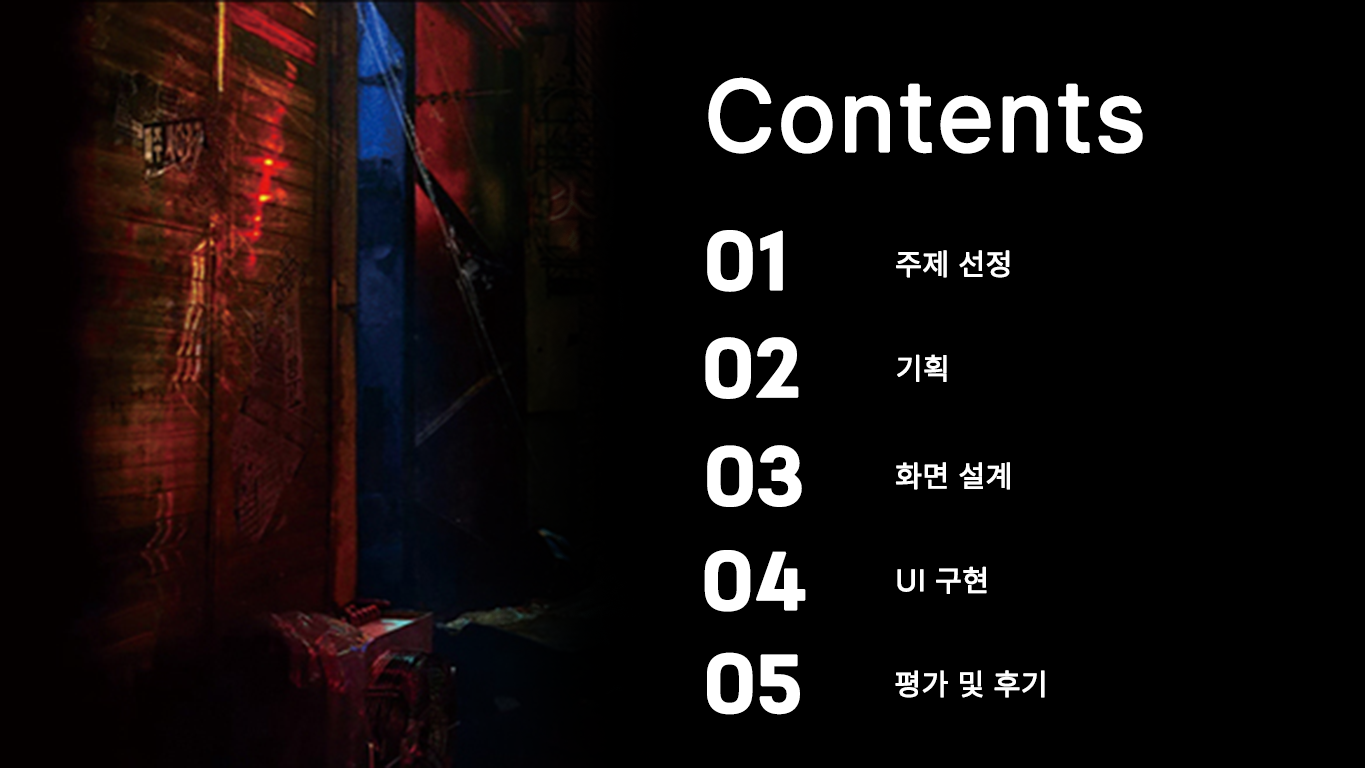
<style>
.page{position:relative;width:1365px;height:768px;background:#000000}
.page>*{position:absolute;margin:0}
.t1{font:100px "Pretendard-Regular";letter-spacing:0.03em;color:#ffffff;font-weight:bold}
.t2{font:70px "Cafe24Ohsquare";letter-spacing:0.03em;color:#ffffff;font-weight:bold}
.t3{font:30px "Pretendard-Regular";letter-spacing:0.03em;color:#ffffff;font-weight:bold}
</style>
<div class="page">
<p class="t1" style="left:708px;top:77px;width:435px;height:77px">Contents</p>
<p class="t2" style="left:707px;top:230px;width:76px;height:62px">01</p>
<p class="t3" style="left:896px;top:250px;width:114px;height:28px">주제 선정</p>
<p class="t2" style="left:705px;top:337px;width:94px;height:62px">02</p>
<p class="t3" style="left:897px;top:354px;width:50px;height:28px">기획</p>
<p class="t2" style="left:707px;top:445px;width:95px;height:62px">03</p>
<p class="t3" style="left:895px;top:462px;width:115px;height:28px">화면 설계</p>
<p class="t2" style="left:704px;top:550px;width:102px;height:62px">04</p>
<p class="t3" style="left:897px;top:566px;width:90px;height:28px">UI 구현</p>
<p class="t2" style="left:707px;top:652px;width:93px;height:63px">05</p>
<p class="t3" style="left:895px;top:670px;width:150px;height:28px">평가 및 후기</p>
</div>
